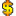
<style>
.page{position:relative;width:16px;height:16px;background:#ffffff}
.page>*{position:absolute;margin:0}
.t1{font:18.1px "Terminal"}
</style>
<div class="page">
<p class="t1" style="left:3px;top:0px;width:10px;height:16px">$</p>
</div>
